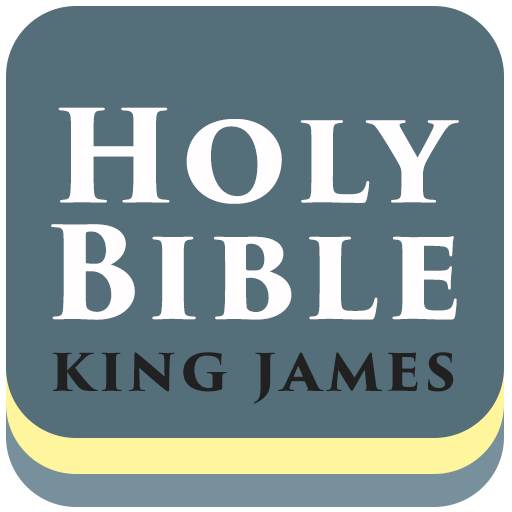
<style>
.page{position:relative;width:512px;height:512px;background:#546e7a}
.page>*{position:absolute;margin:0}
.t1{font:125px/116.7px "TrajanPro3-Bold";letter-spacing:0.06em;color:#fffdfd}
.t2{font:58.3px "TrajanPro3-Bold";letter-spacing:0.06em;color:#212121}
</style>
<div class="page">
<p class="t1" style="left:51px;top:107px;width:408px;height:213px;text-align:center">Holy<br>Bible</p>
<p class="t2" style="left:52px;top:352px;width:402px;height:52px">king james</p>
</div>
